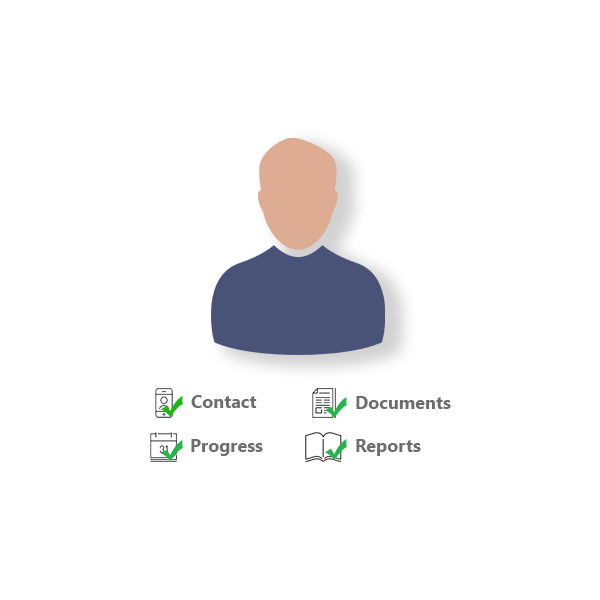
<style>
.page{position:relative;width:600px;height:600px;background:#ffffff}
.page>*{position:absolute;margin:0}
.t1{font:18px "SegoeUI-Bold";color:#6d6d6d}
</style>
<div class="page">
<p class="t1" style="left:191px;top:395px;width:66px;height:13px">Contact</p>
<p class="t1" style="left:356px;top:396px;width:95px;height:13px">Documents</p>
<p class="t1" style="left:191px;top:439px;width:72px;height:17px">Progress</p>
<p class="t1" style="left:356px;top:439px;width:65px;height:17px">Reports</p>
</div>
